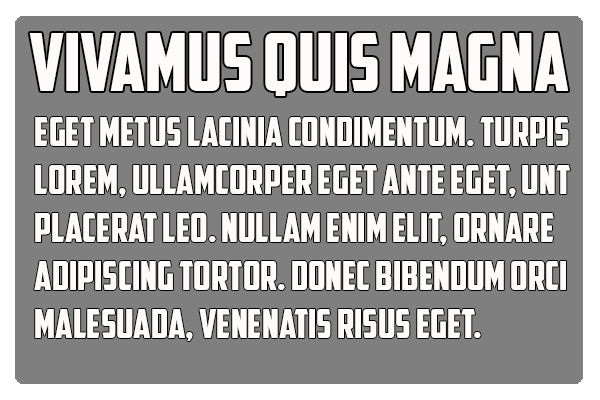
<style>
.page{position:relative;width:600px;height:400px;background:#7f7f7f}
.page>*{position:absolute;margin:0}
.t1{font:80px "AmericanCaptain";color:#fffbfb}
.t2{font:40px "AmericanCaptain";color:#fffbfb}
</style>
<div class="page">
<p class="t1" style="left:29px;top:33px;width:540px;height:63px">Vivamus quis magna</p>
<p class="t2" style="left:34px;top:117px;width:537px;height:224px">eget metus lacinia condimentum. turpis <br>lorem, ullamcorper eget ante eget, unt <br>placerat leo. Nullam enim elit, ornare <br>adipiscing tortor. Donec bibendum orci <br>malesuada, venenatis risus eget.</p>
</div>
